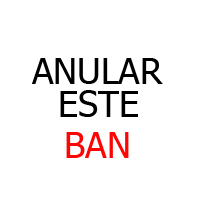
<style>
.page{position:relative;width:200px;height:200px;background:#ffffff}
.page>*{position:absolute;margin:0}
.t1{font:36px "Tahoma";color:#000000}
.t2{font:36px "Tahoma";color:#fe0404}
</style>
<div class="page">
<p class="t1" style="left:32px;top:58px;width:131px;height:26px">ANULAR</p>
<p class="t1" style="left:60px;top:90px;width:78px;height:27px">ESTE</p>
<p class="t2" style="left:66px;top:132px;width:63px;height:26px">BAN</p>
</div>
